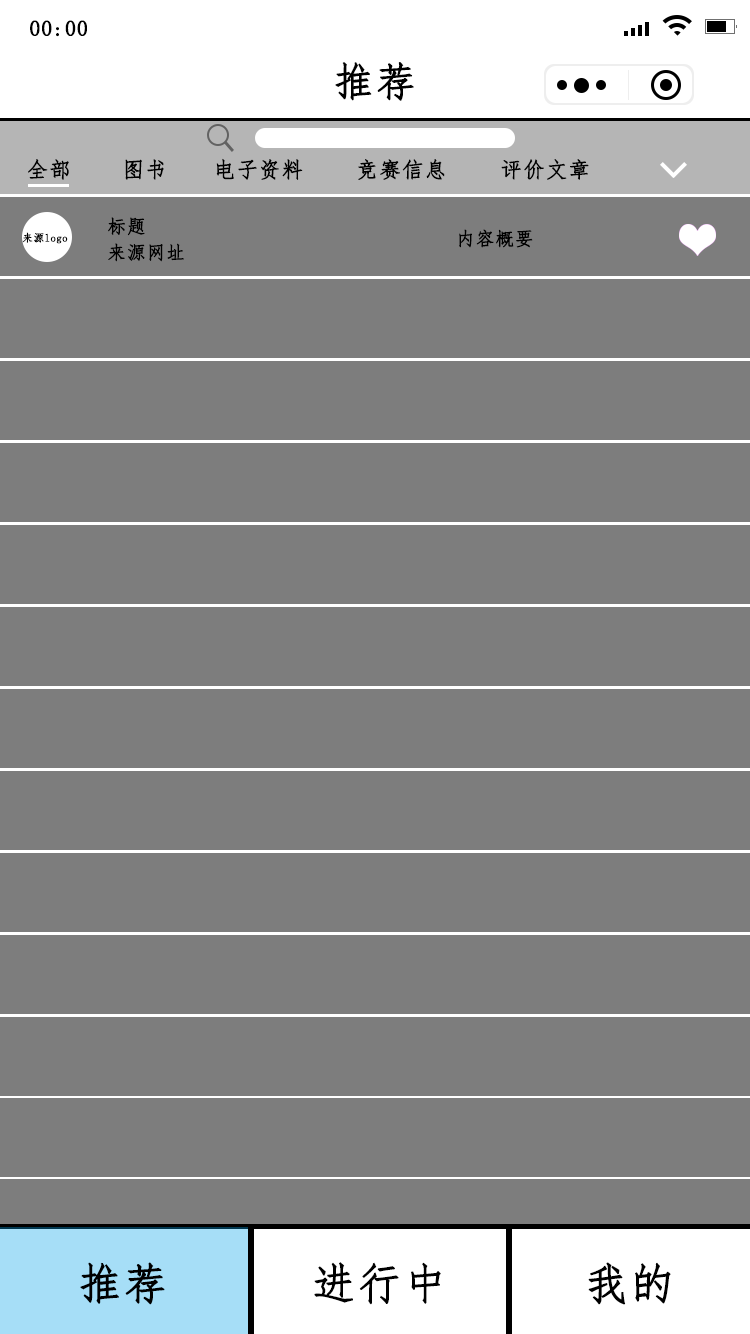
<style>
.page{position:relative;width:750px;height:1334px;background:#7d7d7d}
.page>*{position:absolute;margin:0}
.t1{font:21.7px "FangSong";letter-spacing:0.02em;color:#000000;font-weight:bold}
.t2{font:40.7px "FangSong";letter-spacing:0.02em;color:#000000;font-weight:bold}
.t3{font:18.7px "FangSong";letter-spacing:0.02em;color:#000000;font-weight:bold}
.t4{font:10.7px "FangSong";letter-spacing:0.02em;color:#000000;font-weight:bold}
.t5{font:43.7px "FangSong";letter-spacing:0.02em;color:#000000;font-weight:bold}
</style>
<div class="page">
<p class="t1" style="left:30px;top:20px;width:57px;height:17px">00:00</p>
<p class="t2" style="left:335px;top:62px;width:79px;height:39px">推荐</p>
<p class="t1" style="left:28px;top:159px;width:41px;height:21px">全部</p>
<p class="t1" style="left:125px;top:159px;width:39px;height:21px">图书</p>
<p class="t1" style="left:216px;top:158px;width:87px;height:22px">电子资料</p>
<p class="t1" style="left:358px;top:159px;width:87px;height:21px">竞赛信息</p>
<p class="t1" style="left:501px;top:159px;width:88px;height:21px">评价文章</p>
<p class="t3" style="left:108px;top:217px;width:37px;height:19px">标题</p>
<p class="t4" style="left:22px;top:232px;width:46px;height:12px">来源logo</p>
<p class="t3" style="left:459px;top:229px;width:74px;height:19px">内容概要</p>
<p class="t3" style="left:108px;top:243px;width:76px;height:19px">来源网址</p>
<p class="t5" style="left:80px;top:1262px;width:85px;height:43px">推荐</p>
<p class="t5" style="left:314px;top:1262px;width:127px;height:43px">进行中</p>
<p class="t5" style="left:588px;top:1262px;width:83px;height:43px">我的</p>
</div>
